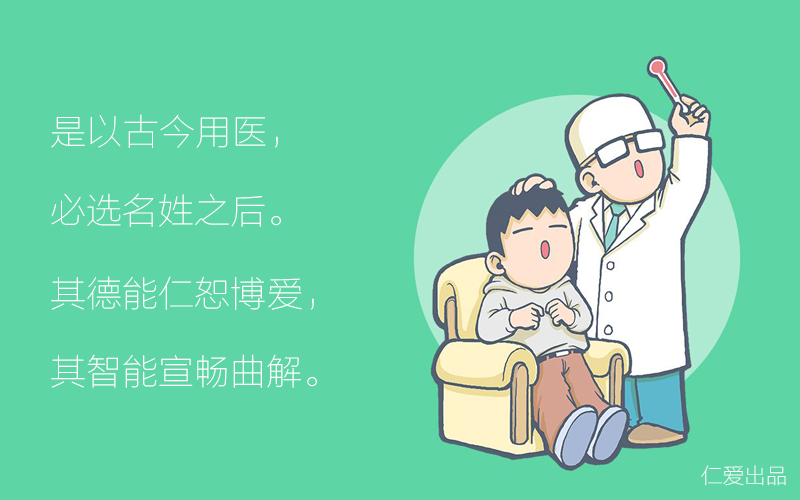
<style>
.page{position:relative;width:800px;height:500px;background:#5dd5a5}
.page>*{position:absolute;margin:0}
.t1{font:36.1px "FZLTCXHJW--GB1-0";color:#ffffff}
.t2{font:21.7px "FZLTCXHJW--GB1-0";color:#ffffff}
</style>
<div class="page">
<p class="t1" style="left:51px;top:114px;width:227px;height:34px">是以古今用医，</p>
<p class="t1" style="left:51px;top:193px;width:230px;height:34px">必选名姓之后。</p>
<p class="t1" style="left:51px;top:276px;width:263px;height:34px">其德能仁恕博爱，</p>
<p class="t1" style="left:51px;top:354px;width:266px;height:34px">其智能宣畅曲解。</p>
<p class="t2" style="left:701px;top:465px;width:85px;height:21px">仁爱出品</p>
</div>
